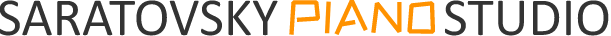
<style>
.page{position:relative;width:611px;height:36px;background:#ffffff}
.page>*{position:absolute;margin:0}
.t1{font:54px "Calibri";color:#333333;font-variant:small-caps}
.t2{font:46px "ZCOOLKuaiLe-Regular";color:#ff9200;font-variant:small-caps}
</style>
<div class="page">
<p class="t1" style="left:0px;top:0px;width:278px;height:36px">SARATOVSKY</p>
<p class="t2" style="left:289px;top:0px;width:147px;height:36px">PIANO</p>
<p class="t1" style="left:444px;top:0px;width:165px;height:36px">STUDIO</p>
</div>
